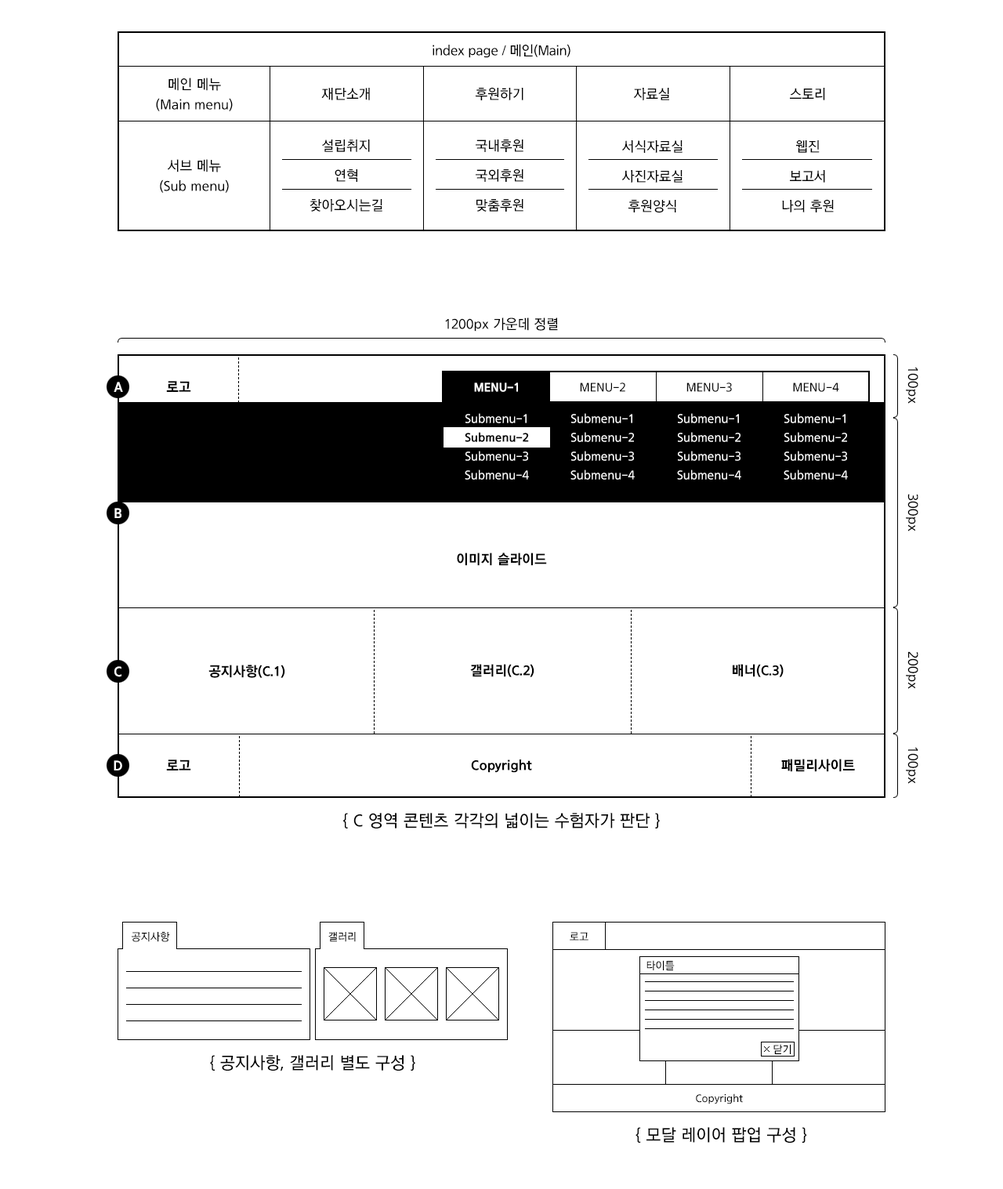
<style>
.page{position:relative;width:1003px;height:1189px;background:#ffffff}
.page>*{position:absolute;margin:0}
.t1{font:14.1px "THELuxGoM";letter-spacing:-0.025em;color:#000000;scale:0.95 1}
.t2{font:14.1px/20.4px "THELuxGoM";color:#000000;scale:0.95 1}
.t3{font:14.1px "THELuxGoM";color:#000000;scale:0.95 1}
.t4{font:14.1px/29.8px "THELuxGoM";color:#000000;scale:0.95 1}
.t5{font:14px "THELuxGoM";color:#000000;scale:0.96 1}
.t6{font:14.1px "THELuxGoEB";color:#ffffff;scale:0.95 1}
.t7{font:14.1px "THELuxGoEB";color:#000000;scale:0.95 1}
.t8{font:12.5px/18.8px "THELuxGoM";color:#ffffff;scale:0.95 1}
.t9{font:12.5px/31.3px "THELuxGoEB";color:#ffffff;scale:0.95 1}
.t10{font:12.5px/31.3px "THELuxGoM";color:#ffffff;scale:0.95 1}
.t11{font:12.5px/18.8px "THELuxGoEB";color:#000000;scale:0.95 1}
.t12{font:12.5px/31.3px "THELuxGoM";color:#000000;scale:0.95 1}
.t13{font:17.2px "THELuxGoM";color:#000000;scale:0.95 1}
.t14{font:11px "THELuxGoM";color:#000000;scale:0.95 1}
</style>
<div class="page">
<p class="t1" style="left:433px;top:44px;width:137px;height:14px">index page / 메인(Main)</p>
<p class="t2" style="left:156px;top:78px;width:77px;height:33px;text-align:center">메인 메뉴<br>(Main menu)</p>
<p class="t3" style="left:321px;top:88px;width:49px;height:12px">재단소개</p>
<p class="t3" style="left:476px;top:87px;width:47px;height:13px">후원하기</p>
<p class="t3" style="left:633px;top:88px;width:36px;height:12px">자료실</p>
<p class="t3" style="left:790px;top:88px;width:35px;height:12px">스토리</p>
<p class="t4" style="left:310px;top:139px;width:72px;height:73px;text-align:center">설립취지<br>연혁<br>찾아오시는길</p>
<p class="t4" style="left:476px;top:139px;width:47px;height:73px;text-align:center">국내후원<br>국외후원<br>맞춤후원</p>
<p class="t4" style="left:621px;top:140px;width:62px;height:73px;text-align:center">서식자료실<br>사진자료실<br>후원양식</p>
<p class="t4" style="left:782px;top:140px;width:52px;height:72px;text-align:center">웹진<br>보고서<br>나의 후원</p>
<p class="t2" style="left:160px;top:159px;width:69px;height:34px;text-align:center">서브 메뉴<br>(Sub menu)</p>
<p class="t3" style="left:445px;top:317px;width:113px;height:14px">1200px 가운데 정렬</p>
<p class="t5" style="left:906px;top:367px;width:12px;height:37px;rotate:90deg">100px</p>
<p class="t6" style="left:114px;top:382px;width:9px;height:10px">A</p>
<p class="t7" style="left:166px;top:381px;width:25px;height:11px">로고</p>
<p class="t8" style="left:465px;top:382px;width:64px;height:98px;text-align:center"><span class="t9">MENU-1<br></span><span class="t10">Submenu-1<br></span><span class="t11">Submenu-2<br></span>Submenu-3<br>Submenu-4</p>
<p class="t8" style="left:570px;top:382px;width:65px;height:98px;text-align:center"><span class="t12">MENU-2<br></span><span class="t10">Submenu-1<br></span>Submenu-2<br>Submenu-3<br>Submenu-4</p>
<p class="t8" style="left:677px;top:382px;width:64px;height:98px;text-align:center"><span class="t12">MENU-3<br></span><span class="t10">Submenu-1<br></span>Submenu-2<br>Submenu-3<br>Submenu-4</p>
<p class="t8" style="left:784px;top:382px;width:64px;height:98px;text-align:center"><span class="t12">MENU-4<br></span><span class="t10">Submenu-1<br></span>Submenu-2<br>Submenu-3<br>Submenu-4</p>
<p class="t5" style="left:906px;top:494px;width:12px;height:37px;rotate:90deg">300px</p>
<p class="t6" style="left:114px;top:508px;width:7px;height:10px">B</p>
<p class="t7" style="left:457px;top:552px;width:90px;height:14px">이미지 슬라이드</p>
<p class="t5" style="left:906px;top:651px;width:12px;height:38px;rotate:90deg">200px</p>
<p class="t7" style="left:208px;top:665px;width:77px;height:13px">공지사항(C.1)</p>
<p class="t7" style="left:470px;top:664px;width:64px;height:13px">갤러리(C.2)</p>
<p class="t7" style="left:733px;top:664px;width:51px;height:13px">배너(C.3)</p>
<p class="t6" style="left:114px;top:666px;width:7px;height:11px">C</p>
<p class="t5" style="left:906px;top:747px;width:12px;height:37px;rotate:90deg">100px</p>
<p class="t6" style="left:114px;top:760px;width:8px;height:10px">D</p>
<p class="t7" style="left:166px;top:759px;width:25px;height:11px">로고</p>
<p class="t7" style="left:471px;top:759px;width:61px;height:14px">Copyright</p>
<p class="t7" style="left:781px;top:759px;width:74px;height:13px">패밀리사이트</p>
<p class="t13" style="left:343px;top:813px;width:317px;height:15px">{ C 영역 콘텐츠 각각의 넓이는 수험자가 판단 }</p>
<p class="t14" style="left:132px;top:932px;width:38px;height:10px">공지사항</p>
<p class="t14" style="left:328px;top:932px;width:28px;height:10px">갤러리</p>
<p class="t14" style="left:570px;top:932px;width:19px;height:8px">로고</p>
<p class="t14" style="left:647px;top:960px;width:28px;height:10px">타이틀</p>
<p class="t14" style="left:773px;top:1044px;width:18px;height:10px">닫기</p>
<p class="t13" style="left:210px;top:1055px;width:205px;height:16px">{ 공지사항, 갤러리 별도 구성 }</p>
<p class="t14" style="left:696px;top:1093px;width:47px;height:11px">Copyright</p>
<p class="t13" style="left:636px;top:1127px;width:171px;height:16px">{ 모달 레이어 팝업 구성 }</p>
</div>
